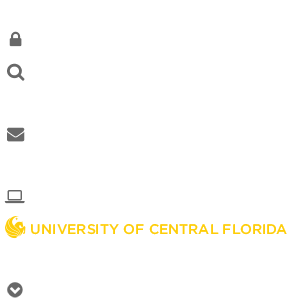
<style>
.page{position:relative;width:290px;height:300px;background:#ffffff}
.page>*{position:absolute;margin:0}
.t1{font:14px "Gotham-Medium";color:#fecd08;text-transform:uppercase}
</style>
<div class="page">
<p class="t1" style="left:31px;top:224px;width:256px;height:11px">University of Central Florida</p>
</div>
